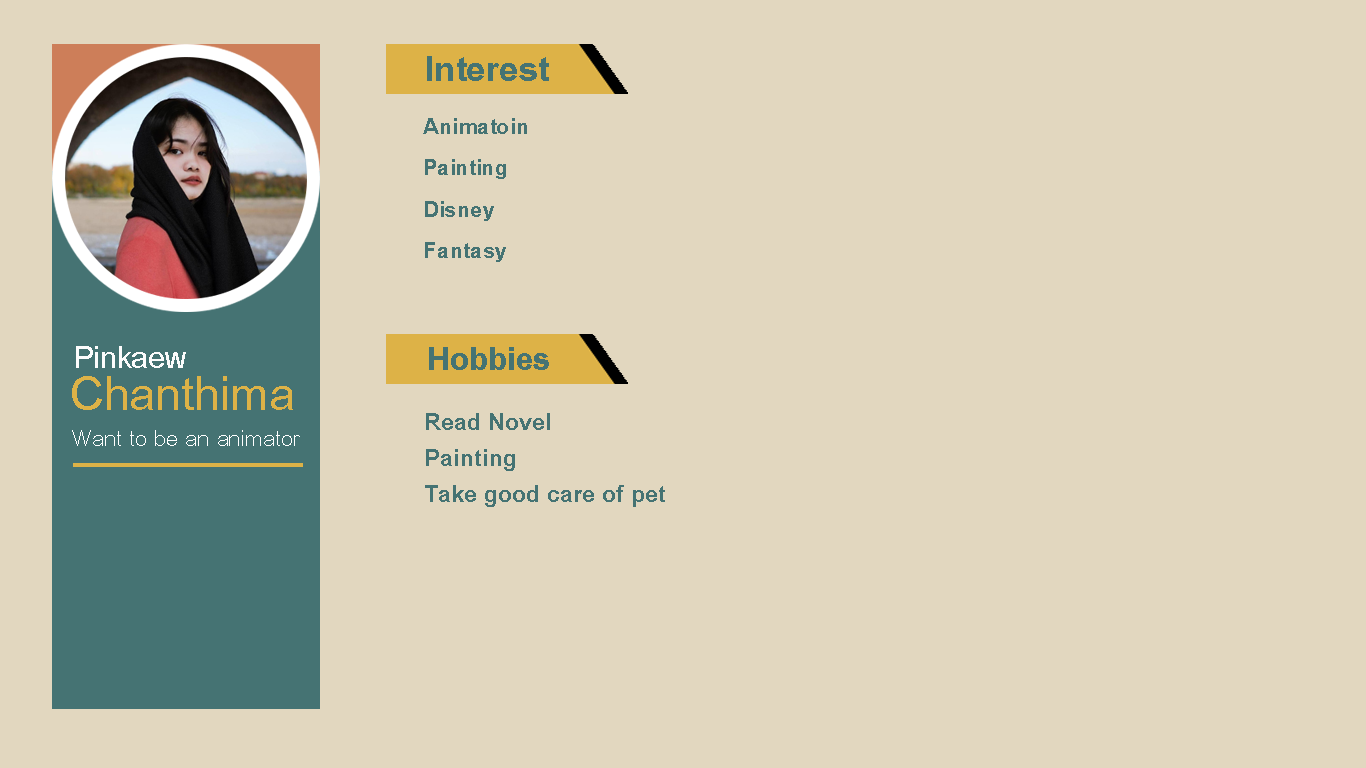
<style>
.page{position:relative;width:1366px;height:768px;background:#e2d7bf}
.page>*{position:absolute;margin:0}
.t1{font:52.1px "BrowalliaNew-Bold";color:#457373}
.t2{font:33px/41.3px "BrowalliaNew-Bold";color:#457373}
.t3{font:45.6px "BrowalliaNew";color:#fcfcfc}
.t4{font:48px "BrowalliaNew-Bold";color:#457373}
.t5{font:71px "BrowalliaNew";color:#ddb247}
.t6{font:36px/36px "BrowalliaNew-Bold";color:#457373}
.t7{font:32.9px "BrowalliaNew";color:#ffffff}
</style>
<div class="page">
<p class="t1" style="left:427px;top:56px;width:122px;height:25px">Interest</p>
<p class="t2" style="left:423px;top:118px;width:104px;height:144px">Animatoin<br>Painting<br>Disney<br>Fantasy</p>
<p class="t3" style="left:76px;top:346px;width:110px;height:22px">Pinkaew</p>
<p class="t4" style="left:429px;top:347px;width:120px;height:23px">Hobbies</p>
<p class="t5" style="left:72px;top:376px;width:221px;height:34px">Chanthima</p>
<p class="t6" style="left:425px;top:413px;width:240px;height:94px">Read Novel<br>Painting<br>Take good care of pet</p>
<p class="t7" style="left:72px;top:430px;width:228px;height:16px">Want to be an animator</p>
</div>
